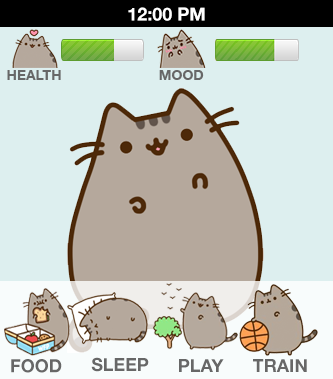
<style>
.page{position:relative;width:333px;height:379px;background:#ddefef}
.page>*{position:absolute;margin:0}
.t1{font:18px "HelveticaNeue-Bold";color:#ffffff}
.t2{font:14px "HelveticaNeue-Bold";color:#676767}
.t3{font:18px "HelveticaNeue-Bold";color:#676767}
</style>
<div class="page">
<p class="t1" style="left:128px;top:7px;width:77px;height:14px">12:00 PM</p>
<p class="t2" style="left:7px;top:70px;width:197px;height:10px">HEALTH                         MOOD</p>
<p class="t3" style="left:11px;top:359px;width:51px;height:14px">FOOD</p>
<p class="t3" style="left:91px;top:357px;width:58px;height:15px">SLEEP</p>
<p class="t3" style="left:179px;top:359px;width:45px;height:13px">PLAY</p>
<p class="t3" style="left:253px;top:359px;width:54px;height:13px">TRAIN</p>
</div>
